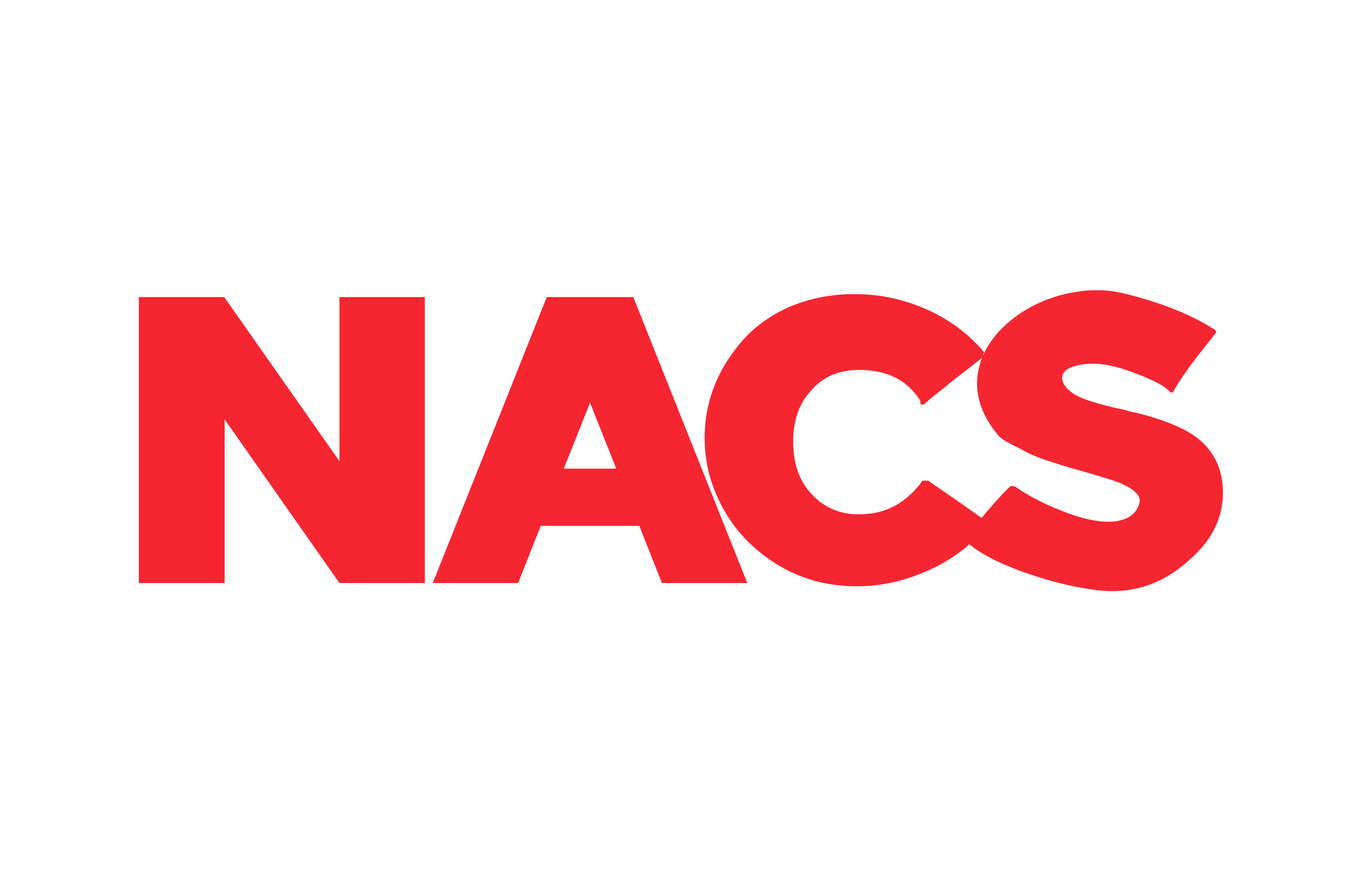
<style>
.page{position:relative;width:1351px;height:882px;background:#ffffff}
.page>*{position:absolute;margin:0}
.t1{font:397.3px "Dolcissimo-Regular";letter-spacing:-0.095em;color:#f62631}
.t2{font:397.3px "EchomotorsDemo";letter-spacing:-0.04em;color:#f62631}
.t3{font:397.3px "EchomotorsDemo";letter-spacing:-0.16em;color:#f62631}
</style>
<div class="page">
<p class="t1" style="left:139px;top:290px;width:1084px;height:302px"><span class="t2">N</span><span class="t3">A</span>CS</p>
</div>
